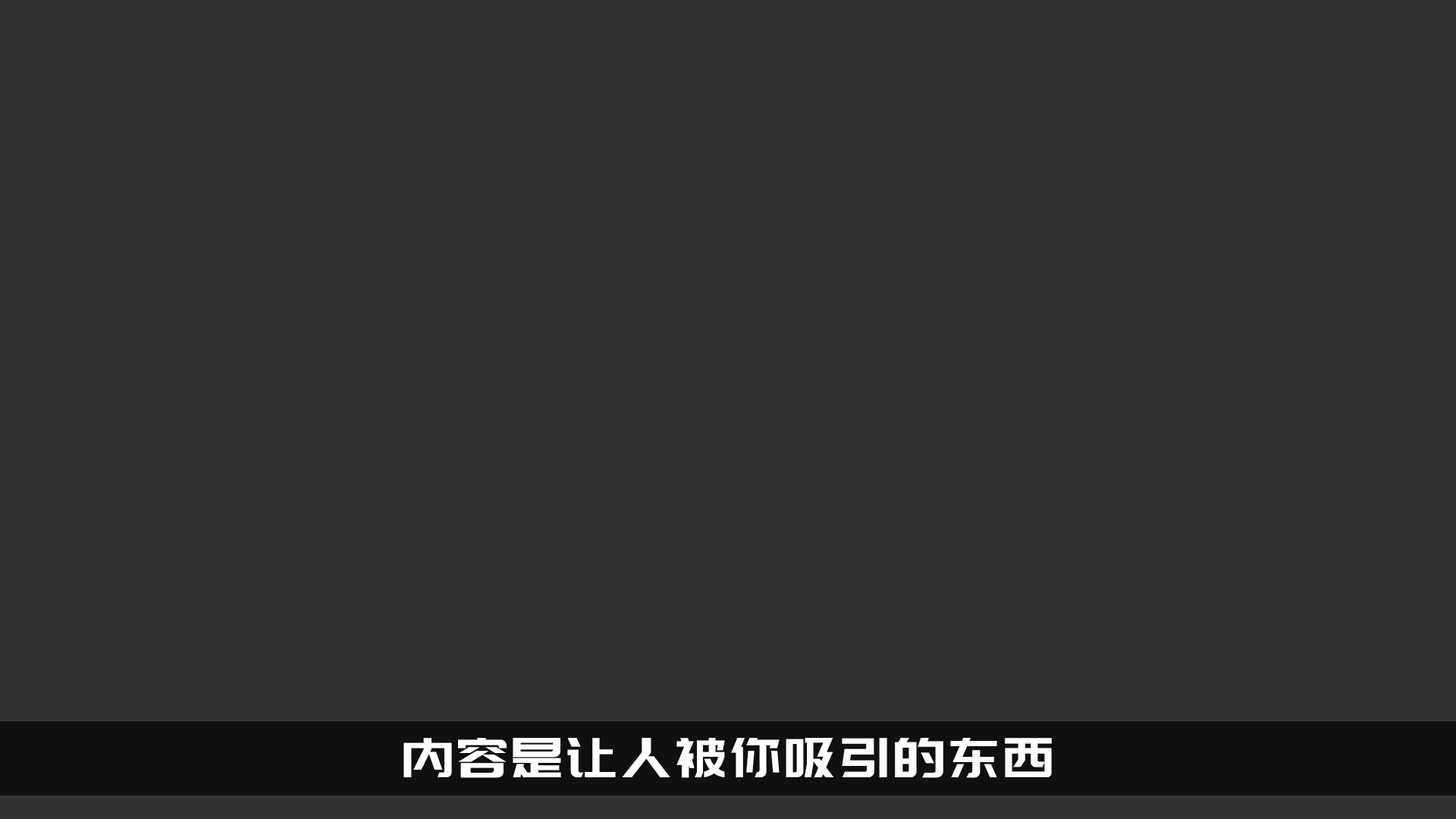
<style>
.page{position:relative;width:1456px;height:819px;background:#333333}
.page>*{position:absolute;margin:0}
.t1{font:54.6px "PangMenZhengDao-3";color:#ffffff}
</style>
<div class="page">
<p class="t1" style="left:403px;top:738px;width:649px;height:40px">内容是让人被你吸引的东西</p>
</div>
